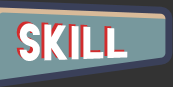
<style>
.page{position:relative;width:173px;height:87px;background:#77989d}
.page>*{position:absolute;margin:0}
.t1{font:41.3px "LemonMilk";letter-spacing:0.05em;color:#ffffff}
</style>
<div class="page">
<p class="t1" style="left:19px;top:23px;width:109px;height:38px">Skill</p>
</div>
